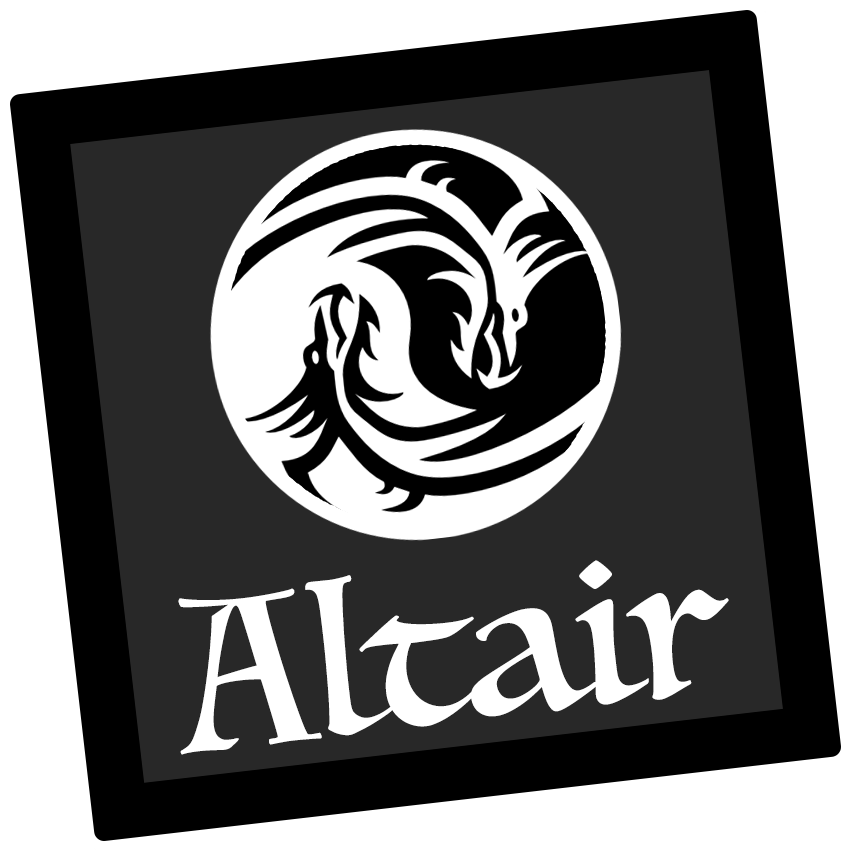
<style>
.page{position:relative;width:852px;height:852px;background:#ffffff}
.page>*{position:absolute;margin:0}
.t1{font:205.2px "Luminari-Regular";color:#ffffff}
</style>
<div class="page">
<p class="t1" style="left:178px;top:560px;width:551px;height:195px;rotate:-7deg">Altair</p>
</div>
